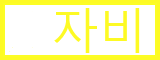
<style>
.page{position:relative;width:160px;height:60px;background:#ffffff}
.page>*{position:absolute;margin:0}
.t1{font:48px "MalgunGothicRegular";color:#fdfa24}
</style>
<div class="page">
<p class="t1" style="left:54px;top:8px;width:86px;height:45px">자비</p>
</div>
